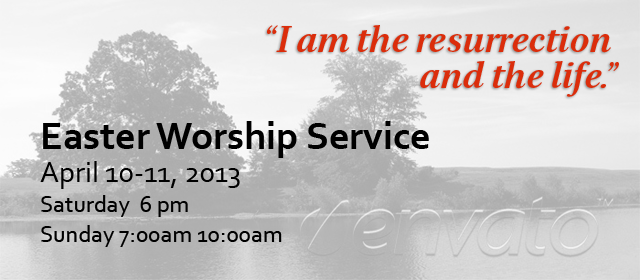
<style>
.page{position:relative;width:640px;height:280px}
.page>*{position:absolute;margin:0}
.t1{font:36px/36px "Serif12Beta-BoldItalic";color:#db2d0b}
.t2{font:40px "Corbel-Bold";color:#000000}
.t3{font:24px/30px "Corbel";color:#000000}
.t4{font:30px/30px "Corbel";color:#000000}
</style>
<div class="page">
<p class="t1" style="left:267px;top:25px;width:352px;height:72px;text-align:right">“I am the resurrection <br>and the life.”</p>
<p class="t2" style="left:43px;top:121px;width:386px;height:37px">Easter Worship Service</p>
<p class="t3" style="left:40px;top:161px;width:242px;height:86px"><span class="t4">April 10-11, 2013<br></span>Saturday  6 pm<br>Sunday 7:00am 10:00am</p>
</div>
